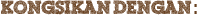
<style>
.page{position:relative;width:198px;height:15px;background:#ffffff}
.page>*{position:absolute;margin:0}
.t1{font:18px "ScribbleBoxDEMO";color:#684121}
.t2{font:18px "Verdana";color:#684121}
</style>
<div class="page">
<p class="t1" style="left:1px;top:0px;width:196px;height:15px">Kongsikan dengan<span class="t2">:</span></p>
</div>
